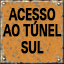
<style>
.page{position:relative;width:64px;height:64px}
.page>*{position:absolute;margin:0}
.t1{font:12px/16.7px "UniversNextPro-Bold";letter-spacing:-0.04em;color:#000000;text-transform:uppercase;font-weight:bold;scale:0.7 1}
</style>
<div class="page">
<p class="t1" style="left:2px;top:8px;width:60px;height:46px;text-align:center">Acesso<br>ao túnel<br>sul</p>
</div>
